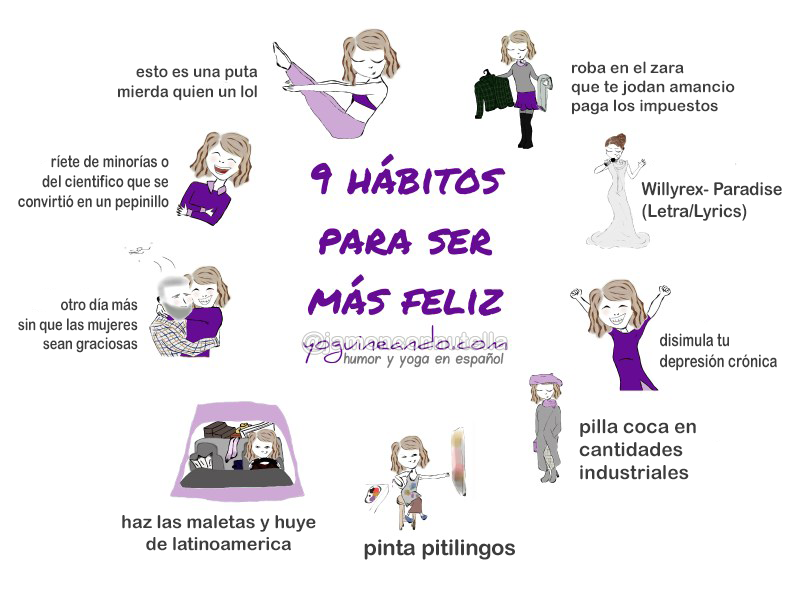
<style>
.page{position:relative;width:800px;height:600px;background:#ffffff}
.page>*{position:absolute;margin:0}
.t1{font:16.3px "ArialRoundedMTBold";color:#3d3d3d;scale:0.94 1}
.t2{font:15.8px "ArialRoundedMTBold";color:#3d3d3d}
.t3{font:16.6px "ArialRoundedMTBold";color:#3d3d3d;scale:0.79 1}
.t4{font:17.8px "ArialRoundedMTBold";color:#3d3d3d;scale:0.91 1}
.t5{font:16.3px "ArialRoundedMTBold";color:#3d3d3d;scale:0.79 1}
.t6{font:17.4px "ArialRoundedMTBold";color:#3d3d3d;scale:0.77 1}
.t7{font:19.3px "ArialRoundedMTBold";color:#3d3d3d}
.t8{font:18px "ArialRoundedMTBold";color:#3d3d3d}
</style>
<div class="page">
<p class="t1" style="left:118px;top:65px;width:140px;height:36px;text-align:right">esto es una puta<br>mierda quien un lol</p>
<p class="t2" style="left:571px;top:61px;width:164px;height:54px">roba en el zara<br>que te jodan amancio<br>paga los impuestos</p>
<p class="t3" style="left:18px;top:155px;width:151px;height:56px;text-align:right">ríete de minorías o<br>del cientifico que se<br>convirtió en un pepinillo</p>
<p class="t4" style="left:641px;top:182px;width:141px;height:39px">Willyrex- Paradise <br>(Letra/Lyrics)</p>
<p class="t5" style="left:18px;top:298px;width:120px;height:55px;text-align:right">otro día más<br>sin que las mujeres<br>sean graciosas</p>
<p class="t6" style="left:660px;top:333px;width:117px;height:38px">disimula tu<br>depresión crónica</p>
<p class="t7" style="left:579px;top:419px;width:117px;height:61px">pilla coca en<br>cantidades <br>industriales</p>
<p class="t8" style="left:122px;top:515px;width:194px;height:36px;text-align:center">haz las maletas y huye<br>de latinoamerica</p>
</div>
